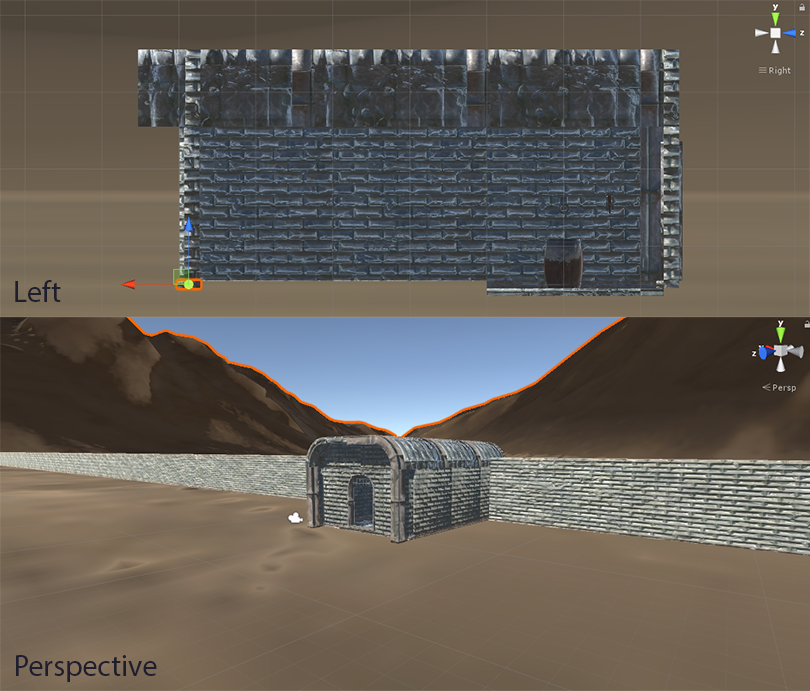
<style>
.page{position:relative;width:810px;height:691px}
.page>*{position:absolute;margin:0}
.t1{font:30px "MyriadPro-Regular";color:#1f1e2e}
</style>
<div class="page">
<p class="t1" style="left:15px;top:280px;width:46px;height:22px">Left</p>
<p class="t1" style="left:16px;top:655px;width:141px;height:27px">Perspective</p>
</div>
